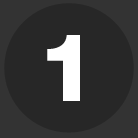
<style>
.page{position:relative;width:138px;height:138px;background:#272727}
.page>*{position:absolute;margin:0}
.t1{font:94px "HelveticaNeueLTStd-Hv";color:#ffffff}
</style>
<div class="page">
<p class="t1" style="left:47px;top:35px;width:33px;height:66px">1</p>
</div>
